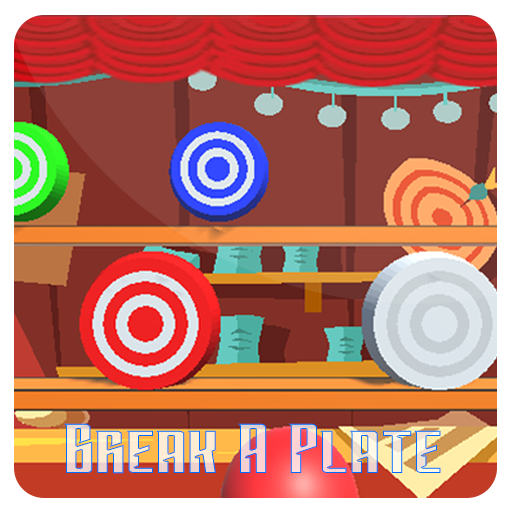
<style>
.page{position:relative;width:512px;height:512px}
.page>*{position:absolute;margin:0}
.t1{font:72px "Subspace";letter-spacing:0.02em}
</style>
<div class="page">
<p class="t1" style="left:64px;top:423px;width:377px;height:51px">Break A Plate</p>
</div>
